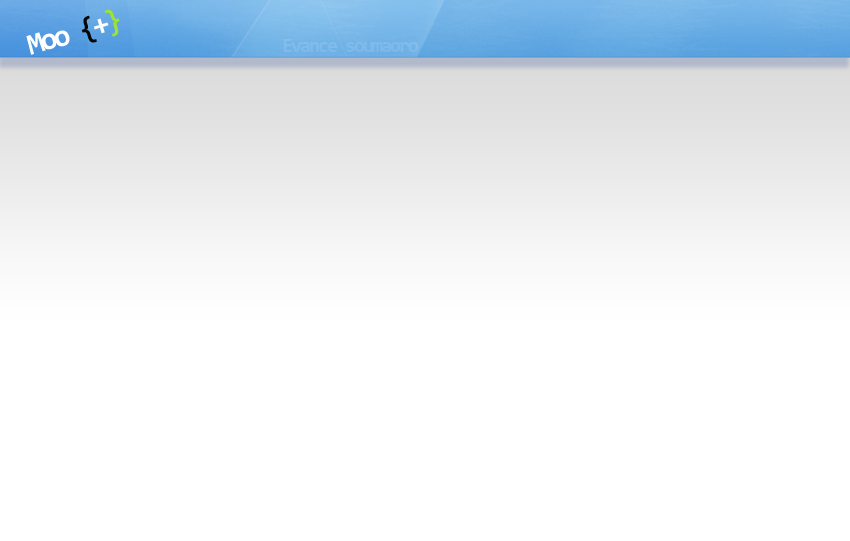
<style>
.page{position:relative;width:850px;height:541px;background:#ffffff}
.page>*{position:absolute;margin:0}
.t1{font:30px "Consolas-Bold";letter-spacing:-0.1em;color:#ffffff}
.t2{font:30px "Consolas-Bold";letter-spacing:-0.1em;color:#060606}
.t3{font:30px "Consolas-Bold";letter-spacing:-0.1em;color:#fefffd}
.t4{font:30px "Consolas-Bold";letter-spacing:-0.1em;color:#9ce335}
.t5{font:20px "Consolas-Bold";letter-spacing:-0.1em;color:#80baec}
</style>
<div class="page">
<p class="t1" style="left:26px;top:9px;width:94px;height:46px;rotate:-17deg">Moo <span class="t2">{</span><span class="t3">+</span><span class="t4">}</span></p>
<p class="t5" style="left:283px;top:39px;width:136px;height:13px">Evance soumaoro</p>
</div>
